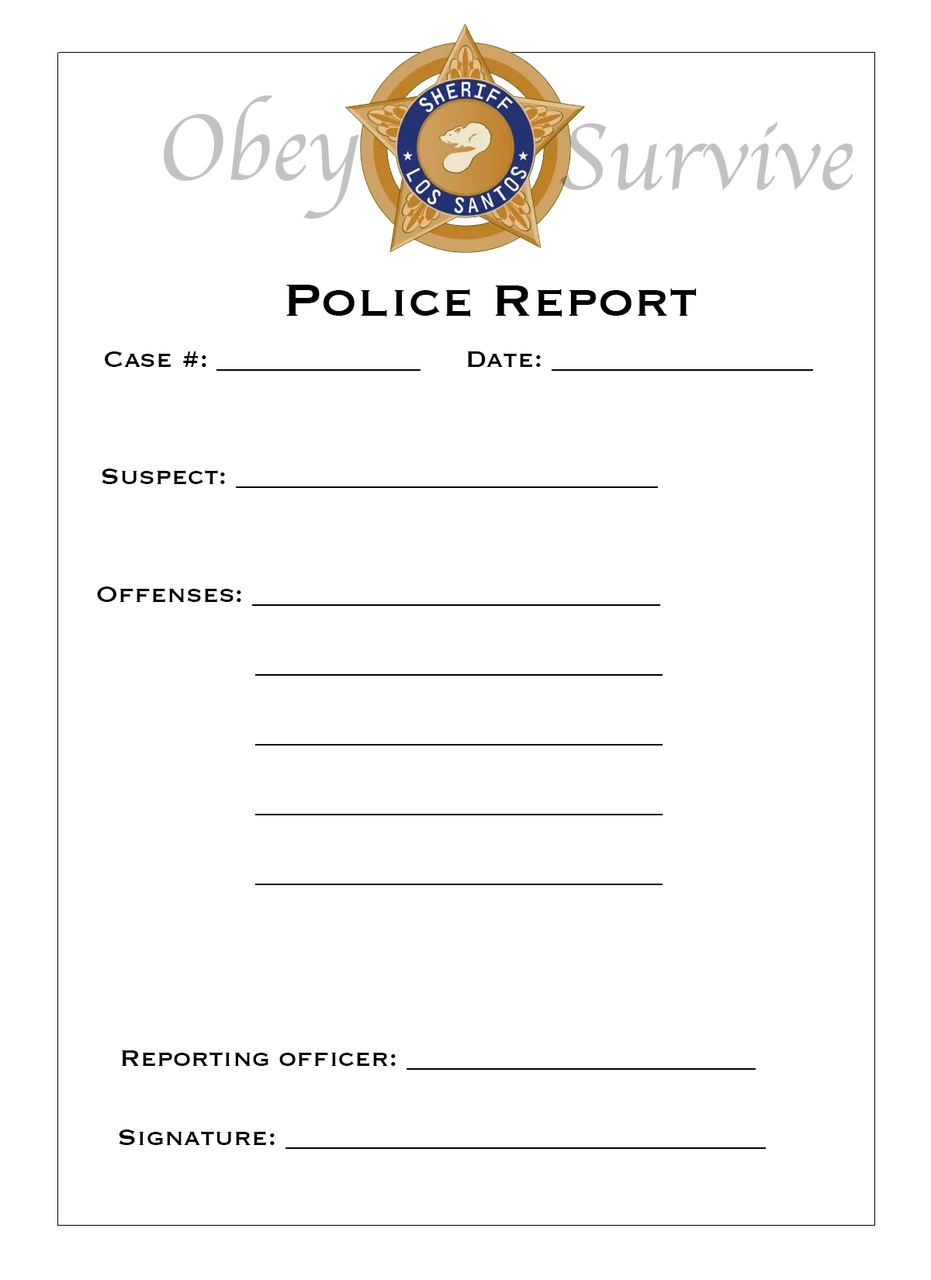
<style>
.page{position:relative;width:931px;height:1280px;background:#ffffff}
.page>*{position:absolute;margin:0}
.t1{font:97px "Apple-Chancery";color:#c2c2c2}
.t2{font:29.1px "Copperplate";color:#000000}
</style>
<div class="page">
<p class="t1" style="left:164px;top:95px;width:195px;height:124px">Obey</p>
<p class="t1" style="left:560px;top:122px;width:294px;height:68px">Survive</p>
<p class="t2" style="left:105px;top:352px;width:316px;height:19px">Case #: ______________</p>
<p class="t2" style="left:467px;top:352px;width:346px;height:19px">Date: __________________</p>
<p class="t2" style="left:102px;top:469px;width:556px;height:19px">Suspect: _____________________________</p>
<p class="t2" style="left:97px;top:587px;width:566px;height:298px">Offenses: ____________________________<br>             <br>                  ____________________________<br>   <br>                  ____________________________<br><br>                  ____________________________<br> <br>                  ____________________________</p>
<p class="t2" style="left:122px;top:1051px;width:634px;height:19px">Reporting officer: ________________________</p>
<p class="t2" style="left:119px;top:1130px;width:647px;height:19px">Signature: _________________________________</p>
</div>
